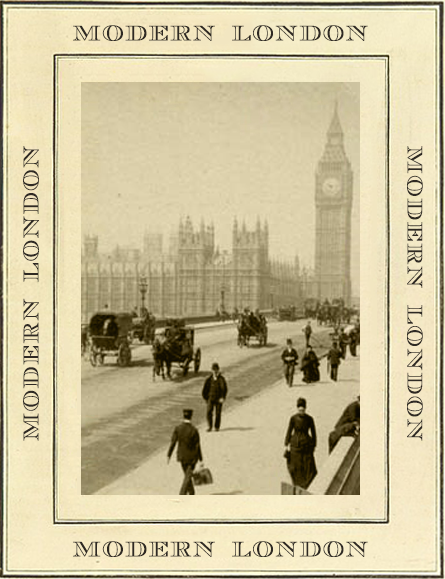
<style>
.page{position:relative;width:445px;height:579px}
.page>*{position:absolute;margin:0}
.t1{font:22px "CurrencyOutline";color:#2e2923}
</style>
<div class="page">
<p class="t1" style="left:73px;top:25px;width:295px;height:16px">MODERN  LONDON</p>
<p class="t1" style="left:23px;top:146px;width:16px;height:295px;rotate:-90deg">MODERN  LONDON</p>
<p class="t1" style="left:407px;top:146px;width:16px;height:295px;rotate:90deg">MODERN  LONDON</p>
<p class="t1" style="left:73px;top:541px;width:295px;height:16px">MODERN  LONDON</p>
</div>
